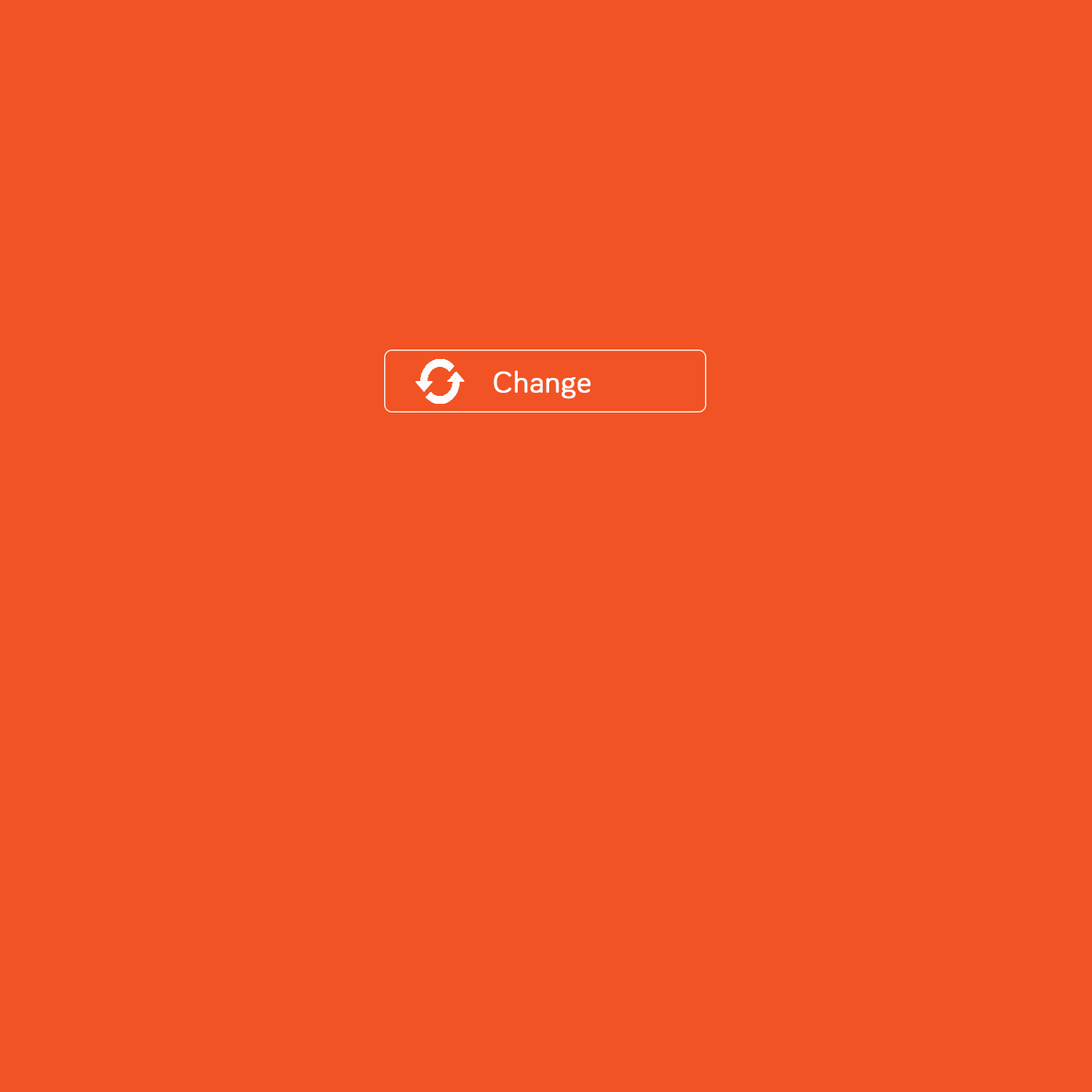
<style>
.page{position:relative;width:1092px;height:1092px;background:#f15324}
.page>*{position:absolute;margin:0}
.t1{font:30.1px "Bariol-Regular";letter-spacing:0.01em;color:#fefefe;font-weight:bold}
</style>
<div class="page">
<p class="t1" style="left:493px;top:370px;width:98px;height:29px">Change</p>
</div>
